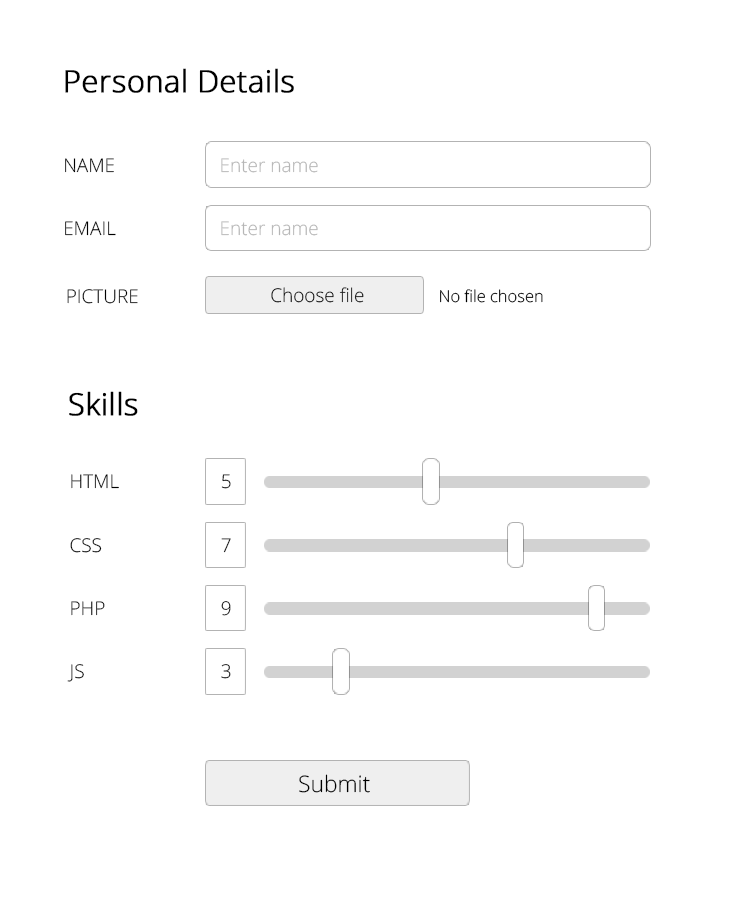
<style>
.page{position:relative;width:740px;height:900px;background:#ffffff}
.page>*{position:absolute;margin:0}
.t1{font:30.4px "OpenSans-Light";color:#000000;font-weight:bold}
.t2{font:19px "OpenSans-Light";color:#000000;text-transform:uppercase}
.t3{font:19px "OpenSans-Light";color:#b6b6b6}
.t4{font:19px "OpenSans-Light"}
.t5{font:16.5px "OpenSans-Light";color:#000000}
.t6{font:19px "OpenSans-Light";text-transform:uppercase}
.t7{font:19px "OpenSans-Light";color:#000000}
.t8{font:22.8px "OpenSans-Light";color:#000000}
</style>
<div class="page">
<p class="t1" style="left:65px;top:68px;width:229px;height:25px">Personal Details</p>
<p class="t2" style="left:65px;top:158px;width:49px;height:15px">Name</p>
<p class="t3" style="left:221px;top:158px;width:97px;height:15px">Enter name</p>
<p class="t2" style="left:65px;top:221px;width:51px;height:15px">EMAIL</p>
<p class="t3" style="left:221px;top:221px;width:97px;height:15px">Enter name</p>
<p class="t2" style="left:67px;top:289px;width:71px;height:15px">picture</p>
<p class="t4" style="left:271px;top:287px;width:93px;height:16px">Choose file</p>
<p class="t5" style="left:440px;top:289px;width:103px;height:14px">No file chosen</p>
<p class="t1" style="left:69px;top:391px;width:69px;height:25px">Skills</p>
<p class="t2" style="left:71px;top:474px;width:48px;height:15px">HTML</p>
<p class="t4" style="left:221px;top:474px;width:10px;height:15px">5</p>
<p class="t2" style="left:70px;top:538px;width:32px;height:15px">CSS</p>
<p class="t4" style="left:221px;top:538px;width:10px;height:15px">7</p>
<p class="t6" style="left:71px;top:601px;width:34px;height:15px">PHP</p>
<p class="t7" style="left:221px;top:601px;width:10px;height:15px">9</p>
<p class="t6" style="left:67px;top:664px;width:17px;height:18px">JS</p>
<p class="t4" style="left:221px;top:664px;width:10px;height:15px">3</p>
<p class="t8" style="left:299px;top:774px;width:71px;height:19px">Submit</p>
</div>
